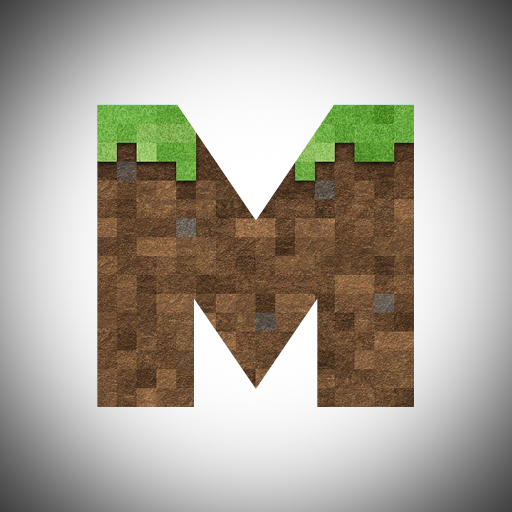
<style>
.page{position:relative;width:512px;height:512px}
.page>*{position:absolute;margin:0}
.t1{font:452.8px "Phosphate-Solid"}
</style>
<div class="page">
<p class="t1" style="left:97px;top:104px;width:317px;height:303px">M</p>
</div>
